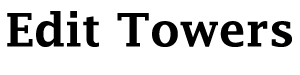
<style>
.page{position:relative;width:300px;height:75px;background:#ffffff}
.page>*{position:absolute;margin:0}
.t1{font:45.8px "LucidaFax-Demi";color:#000000}
</style>
<div class="page">
<p class="t1" style="left:7px;top:11px;width:285px;height:36px">Edit Towers</p>
</div>
